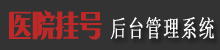
<style>
.page{position:relative;width:220px;height:50px;background:#333333}
.page>*{position:absolute;margin:0}
.t1{font:29.7px "BenmoJinsong";color:#bb2929;font-weight:bold;scale:0.78 1}
.t2{font:23.8px "NSimSun";letter-spacing:0.077em;color:#ffffff;font-weight:bold;scale:0.67 1}
</style>
<div class="page">
<p class="t1" style="left:9px;top:10px;width:93px;height:30px">医院挂号</p>
<p class="t2" style="left:110px;top:17px;width:104px;height:22px">后台管理系统</p>
</div>
